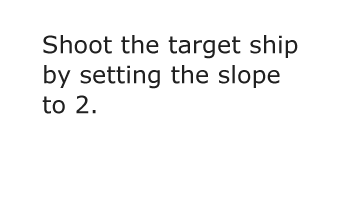
<style>
.page{position:relative;width:340px;height:222px;background:#ffffff}
.page>*{position:absolute;margin:0}
.t1{font:24px/30px "Verdana";color:#202020}
</style>
<div class="page">
<p class="t1" style="left:42px;top:35px;width:256px;height:79px">Shoot the target ship<br>by setting the slope to 2.</p>
</div>
